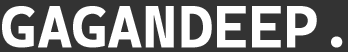
<style>
.page{position:relative;width:348px;height:52px;background:#333333}
.page>*{position:absolute;margin:0}
.t1{font:58.9px "CascadiaMono-Bold";color:#ffffff;font-weight:bold}
</style>
<div class="page">
<p class="t1" style="left:2px;top:6px;width:341px;height:42px">GAGANDEEP.</p>
</div>
